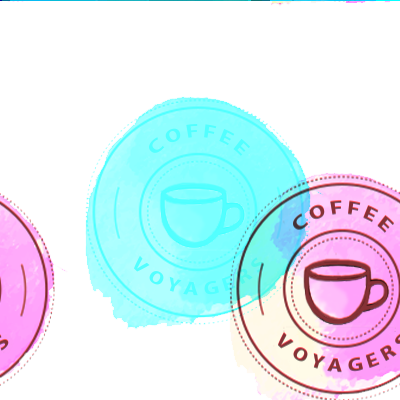
<style>
.page{position:relative;width:400px;height:400px;background:#ffffff}
.page>*{position:absolute;margin:0}
.t1{font:18px/70px "MyriadPro-Bold";color:#53ffff;text-transform:uppercase}
</style>
<div class="page">
<p class="t1" style="left:149px;top:123px;width:102px;height:32px;text-align:center">c o f f e e</p>
<p class="t1" style="left:133px;top:254px;width:132px;height:41px;text-align:center">V O Y A G E R S</p>
</div>
